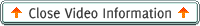
<style>
.page{position:relative;width:200px;height:26px;background:#ffffff}
.page>*{position:absolute;margin:0}
.t1{font:15px "Delicious-Roman";color:#323232}
</style>
<div class="page">
<p class="t1" style="left:29px;top:7px;width:142px;height:12px">Close Video Information</p>
</div>
